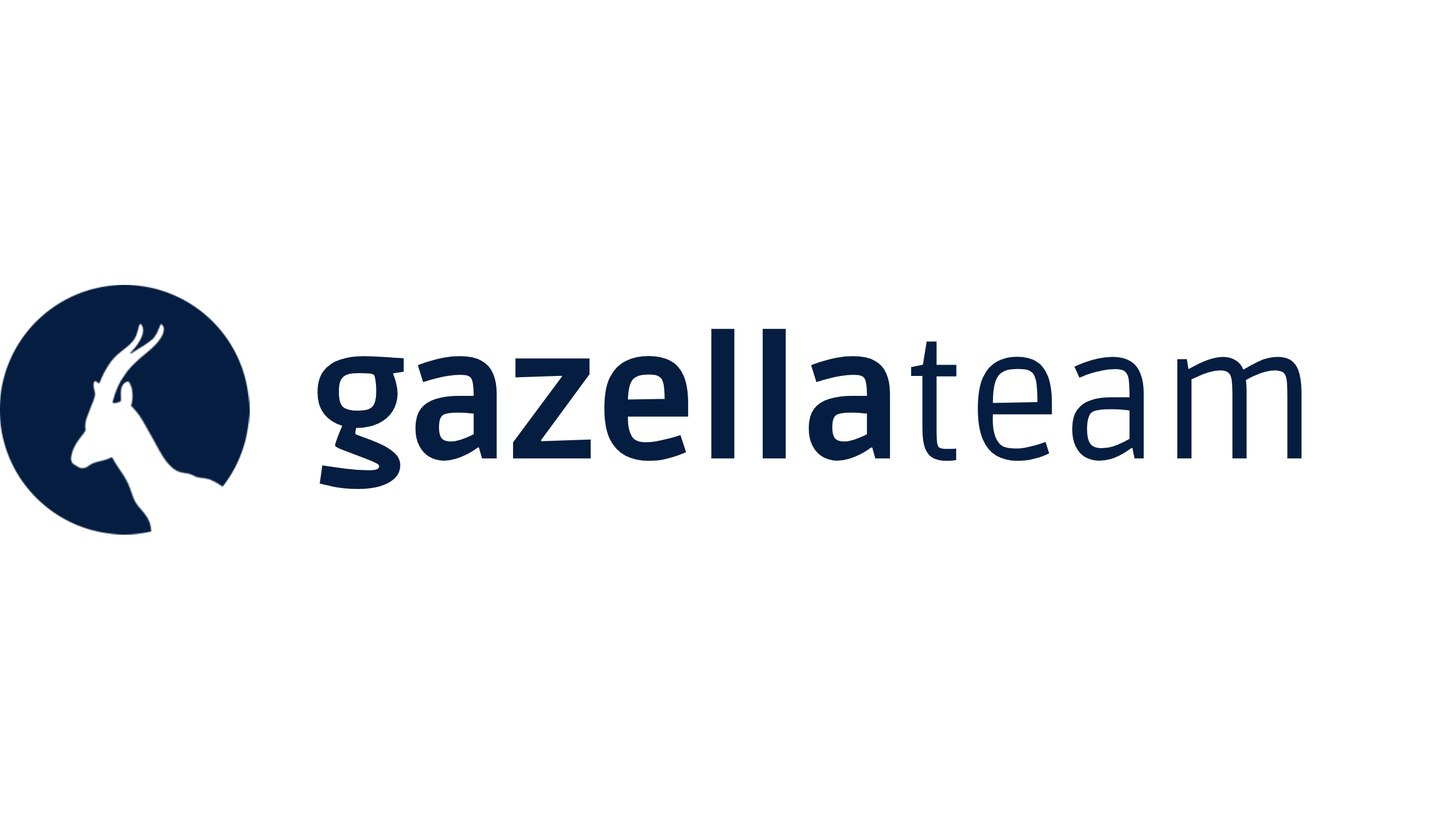
<style>
.page{position:relative;width:1456px;height:819px;background:#ffffff}
.page>*{position:absolute;margin:0}
.t1{font:170.6px "Ruda-ExtraBold";color:#051d40}
.t2{font:170.6px "Ruda-Regular";color:#051d40}
</style>
<div class="page">
<p class="t1" style="left:317px;top:329px;width:985px;height:160px">gazella<span class="t2">team</span></p>
</div>
